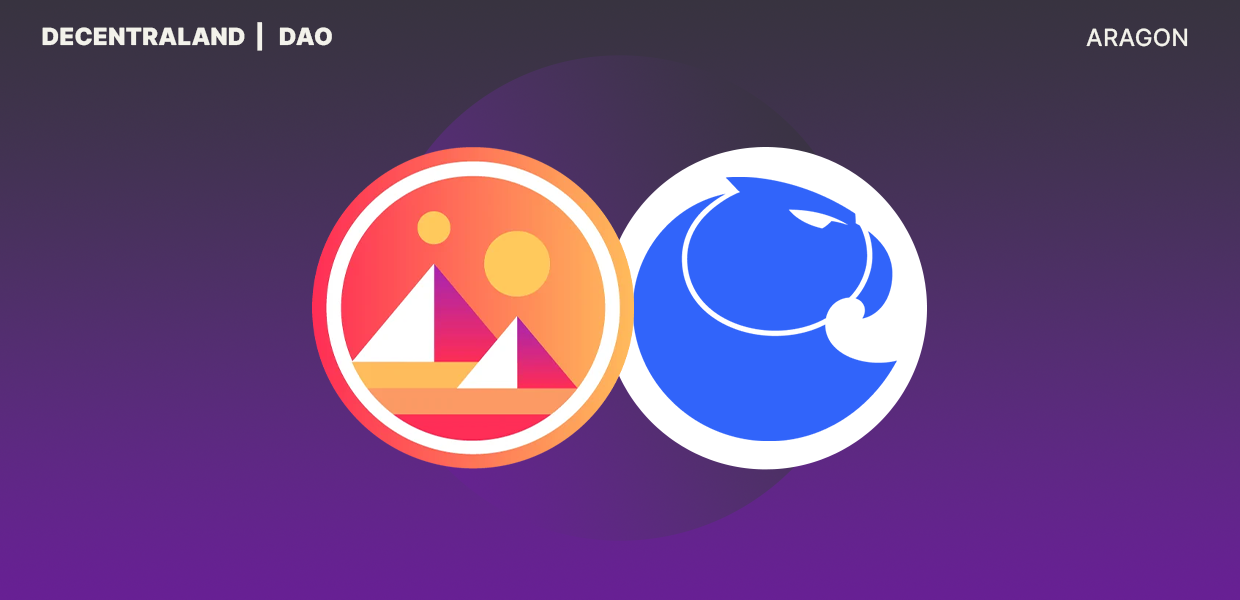
<style>
.page{position:relative;width:1240px;height:600px}
.page>*{position:absolute;margin:0}
.t1{font:23.8px "Inter-Black";color:#f3f2eb;text-transform:uppercase}
.t2{font:23.8px "Inter-Medium";color:#f3f2eb;text-transform:uppercase}
</style>
<div class="page">
<p class="t1" style="left:42px;top:22px;width:290px;height:29px">decentraland  |   DAO</p>
<p class="t2" style="left:1086px;top:28px;width:102px;height:19px">aragon</p>
</div>
